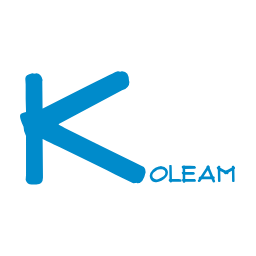
<style>
.page{position:relative;width:256px;height:256px;background:#ffffff}
.page>*{position:absolute;margin:0}
.t1{font:150px "Flux-Architect";color:#008bcb;font-weight:bold}
.t2{font:22px "Flux-Architect";color:#008bcb;font-weight:bold}
</style>
<div class="page">
<p class="t1" style="left:20px;top:71px;width:126px;height:114px">k</p>
<p class="t2" style="left:149px;top:165px;width:87px;height:18px">OLEAM</p>
</div>
